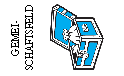
<style>
.page{position:relative;width:124px;height:76px;background:#ffffff}
.page>*{position:absolute;margin:0}
.t1{font:12px "AdobeDevanagari-Regular";color:#000000;scale:0.9 1}
</style>
<div class="page">
<p class="t1" style="left:11px;top:5px;width:22px;height:65px;text-align:center;rotate:-90deg">GEMEI-<br>SCHAFTSFELD</p>
</div>
